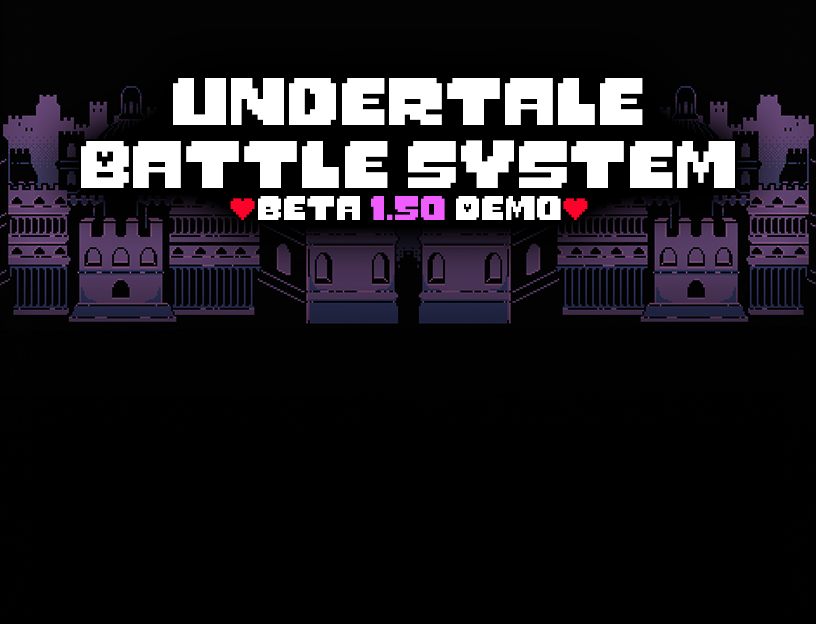
<style>
.page{position:relative;width:816px;height:624px;background:#000000}
.page>*{position:absolute;margin:0}
.t1{font:52.8px "MonsterFriendFore";color:#ffffff}
.t2{font:26.4px "MonsterFriendFore";color:#ff022c}
.t3{font:26.4px "MonsterFriendFore";color:#ffffff}
.t4{font:26.4px "MonsterFriendFore";color:#ef5dff}
</style>
<div class="page">
<p class="t1" style="left:81px;top:78px;width:654px;height:142px;text-align:center">Undertale<br>Battle System<br><span class="t2">(</span><span class="t3">beta </span><span class="t4">1.50 </span><span class="t3">Demo</span><span class="t2">)</span></p>
</div>
